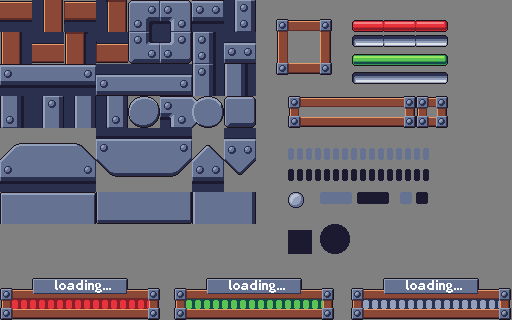
<style>
.page{position:relative;width:512px;height:320px;background:#808080}
.page>*{position:absolute;margin:0}
.t1{font:14.6px "Planes_ValMore-Bold";color:#fcfefe}
</style>
<div class="page">
<p class="t1" style="left:55px;top:280px;width:56px;height:13px">loading...</p>
<p class="t1" style="left:229px;top:280px;width:56px;height:13px">loading...</p>
<p class="t1" style="left:406px;top:280px;width:56px;height:13px">loading...</p>
</div>
